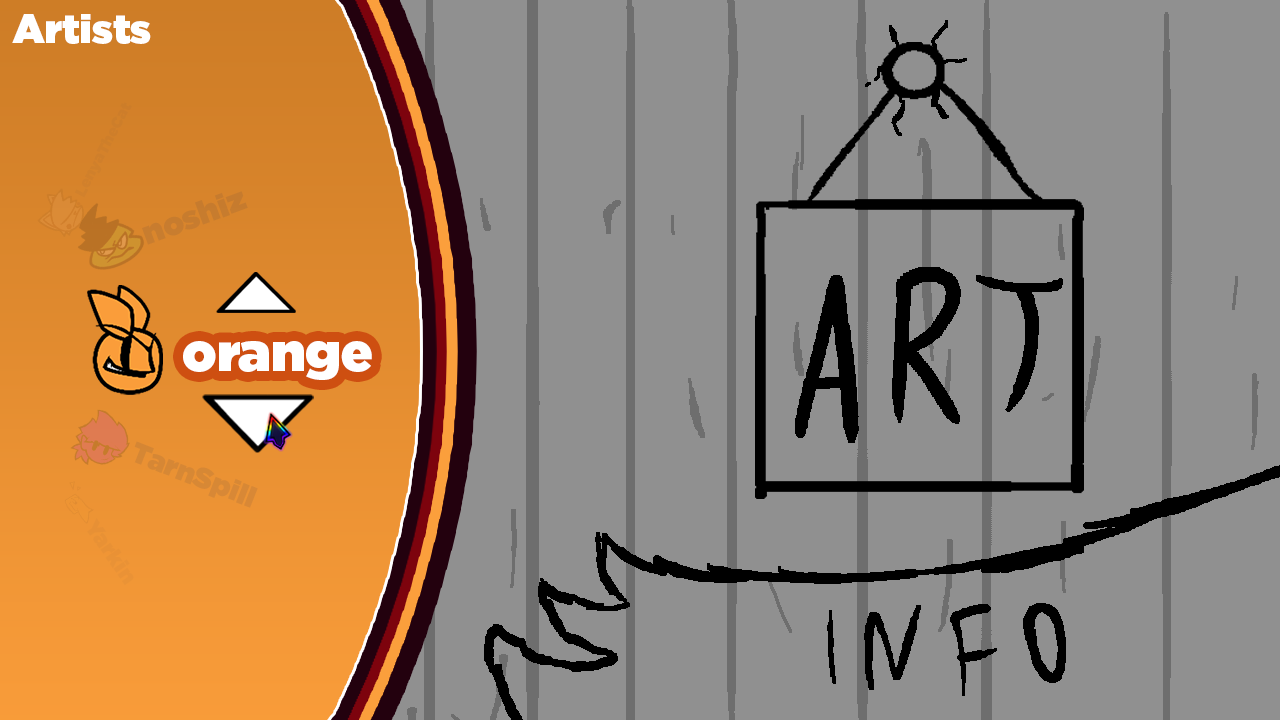
<style>
.page{position:relative;width:1280px;height:720px;background:#909090}
.page>*{position:absolute;margin:0}
.t1{font:39.9px "Gotham-Ultra";color:#ffffff}
.t2{font:15.3px "Gotham-Ultra";color:#cf7f2a}
.t3{font:32.3px "Gotham-Ultra";color:#c77c2e}
.t4{font:53.3px "Gotham-Ultra";color:#ffffff}
.t5{font:22.1px "Gotham-Ultra";color:#e99135}
</style>
<div class="page">
<p class="t1" style="left:12px;top:14px;width:139px;height:30px">Artists</p>
<p class="t2" style="left:74px;top:102px;width:58px;height:96px;rotate:-62deg">LenyaTheCat</p>
<p class="t3" style="left:142px;top:191px;width:106px;height:54px;rotate:-20deg">noshiz</p>
<p class="t4" style="left:183px;top:341px;width:189px;height:39px">orange</p>
<p class="t5" style="left:87px;top:518px;width:47px;height:68px;rotate:55deg">Yarkin</p>
</div>
